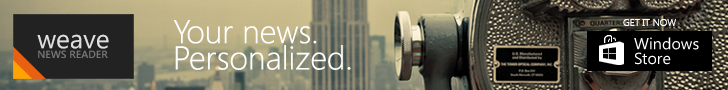
<style>
.page{position:relative;width:728px;height:90px}
.page>*{position:absolute;margin:0}
.t1{font:32.8px/26.3px "SegoeUI-Light";color:#ffffff}
.t2{font:10px "SegoeUI-Light";color:#ffffff}
.t3{font:10.4px/9.7px "SegoeUI-Semibold";color:#767676}
.t4{font:26.3px/9.7px "SegoeUI";color:#dfdfdf}
</style>
<div class="page">
<p class="t1" style="left:173px;top:20px;width:178px;height:50px">Your news. <br>Personalized.</p>
<p class="t2" style="left:623px;top:19px;width:53px;height:7px">GET IT NOW</p>
<p class="t3" style="left:37px;top:34px;width:72px;height:24px"><span class="t4">weave<br></span>NEWS READER</p>
</div>
